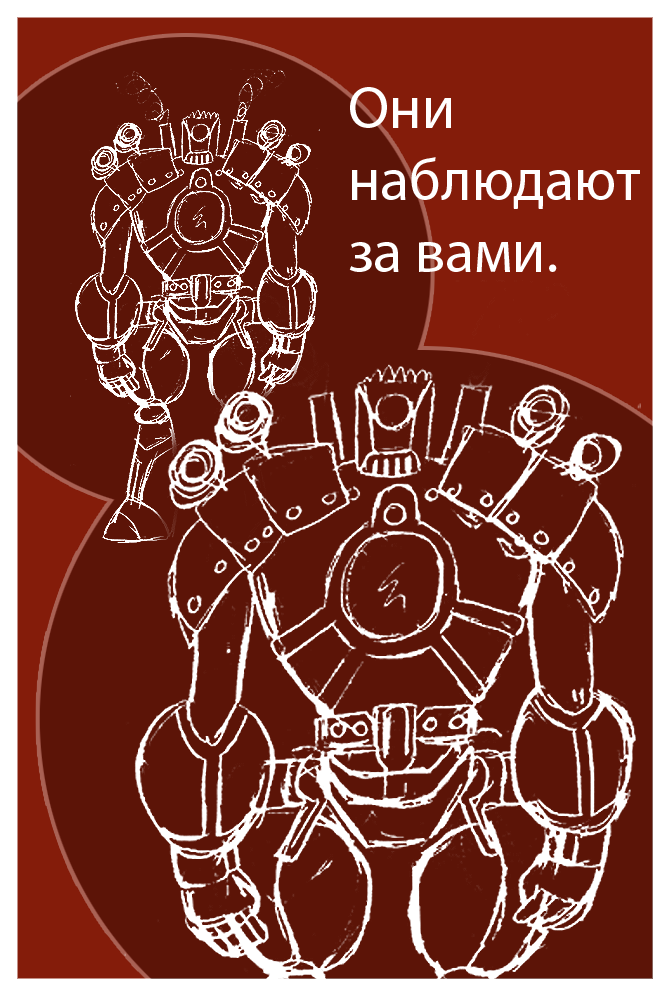
<style>
.page{position:relative;width:670px;height:996px;background:#5c1407}
.page>*{position:absolute;margin:0}
.t1{font:60px "MyriadPro-Regular";color:#ffffff}
</style>
<div class="page">
<p class="t1" style="left:349px;top:87px;width:291px;height:185px">Они <br>наблюдают <br>за вами.</p>
</div>
